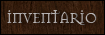
<style>
.page{position:relative;width:105px;height:35px}
.page>*{position:absolute;margin:0}
.t1{font:16.4px "Mason-Regular";letter-spacing:-0.02em;color:#ada9a9;scale:0.87 1}
</style>
<div class="page">
<p class="t1" style="left:7px;top:10px;width:90px;height:15px">INVENTARIO</p>
</div>
